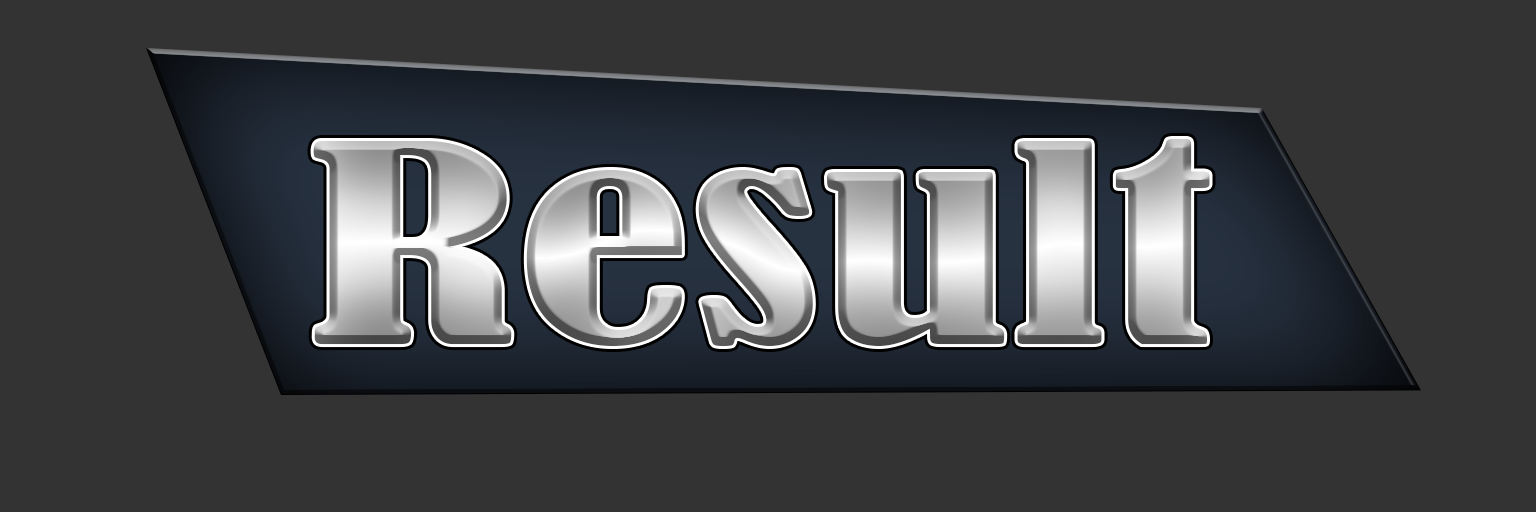
<style>
.page{position:relative;width:1536px;height:512px;background:#333333}
.page>*{position:absolute;margin:0}
.t1{font:258.3px "BernardMT-Condensed";scale:1.5 1}
</style>
<div class="page">
<p class="t1" style="left:313px;top:139px;width:897px;height:207px">Result</p>
</div>
